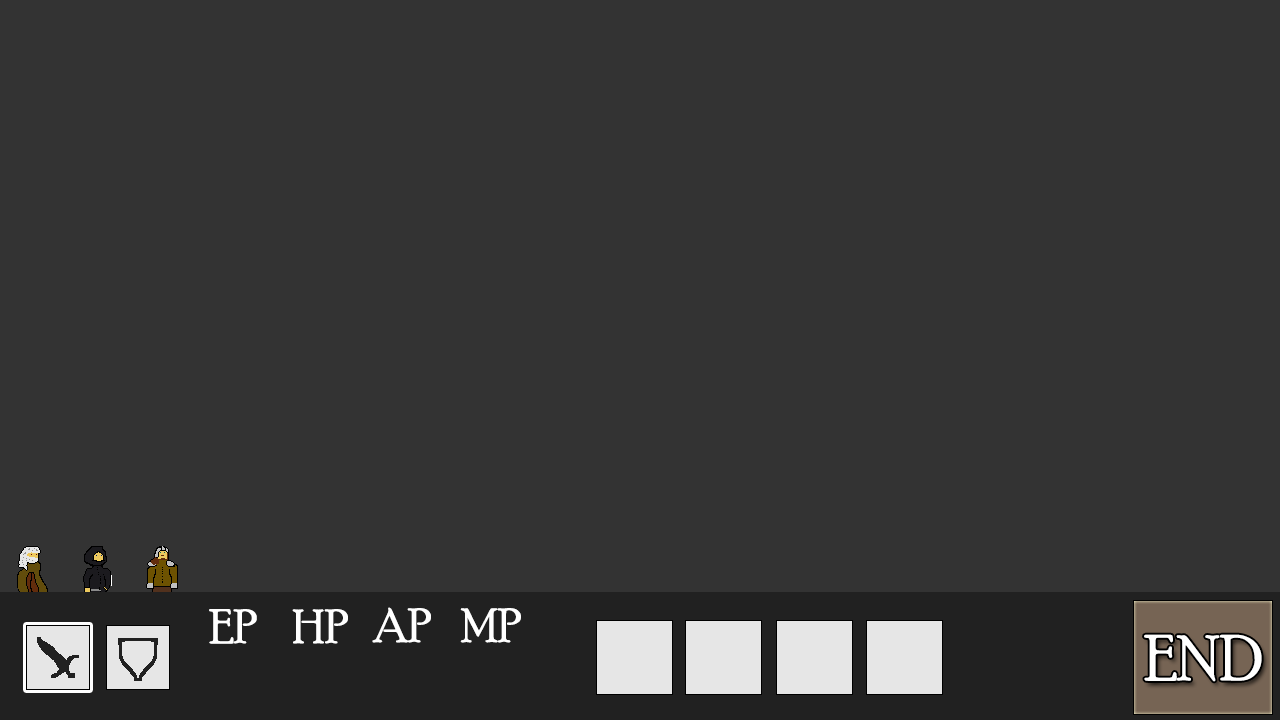
<style>
.page{position:relative;width:1280px;height:720px;background:#333333}
.page>*{position:absolute;margin:0}
.t1{font:48px "PoorRichard-Regular";color:#ffffff}
.t2{font:64px "PoorRichard-Regular";color:#ffffff}
</style>
<div class="page">
<p class="t1" style="left:209px;top:609px;width:48px;height:35px">EP</p>
<p class="t1" style="left:292px;top:609px;width:56px;height:35px">HP</p>
<p class="t1" style="left:372px;top:607px;width:59px;height:36px">AP</p>
<p class="t1" style="left:460px;top:608px;width:61px;height:35px">MP</p>
<p class="t2" style="left:1144px;top:634px;width:118px;height:48px">END</p>
</div>
